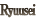
<style>
.page{position:relative;width:36px;height:18px;background:#ffffff}
.page>*{position:absolute;margin:0}
.t1{font:14px "RyuminPro-ExBold";letter-spacing:-0.12em;color:#4a3f32;font-weight:bold;scale:0.8 1}
</style>
<div class="page">
<p class="t1" style="left:0px;top:4px;width:36px;height:14px">Ryuusei</p>
</div>
